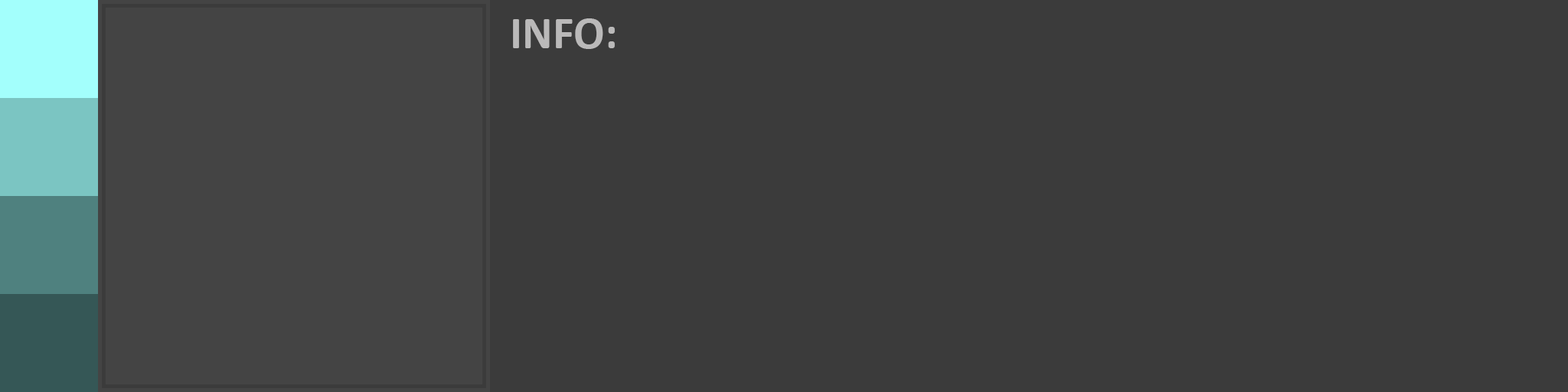
<style>
.page{position:relative;width:1568px;height:392px;background:#3b3b3b}
.page>*{position:absolute;margin:0}
.t1{font:45.9px "Calibri-Bold";color:#bab9b9}
</style>
<div class="page">
<p class="t1" style="left:513px;top:18px;width:102px;height:31px">INFO:</p>
</div>
